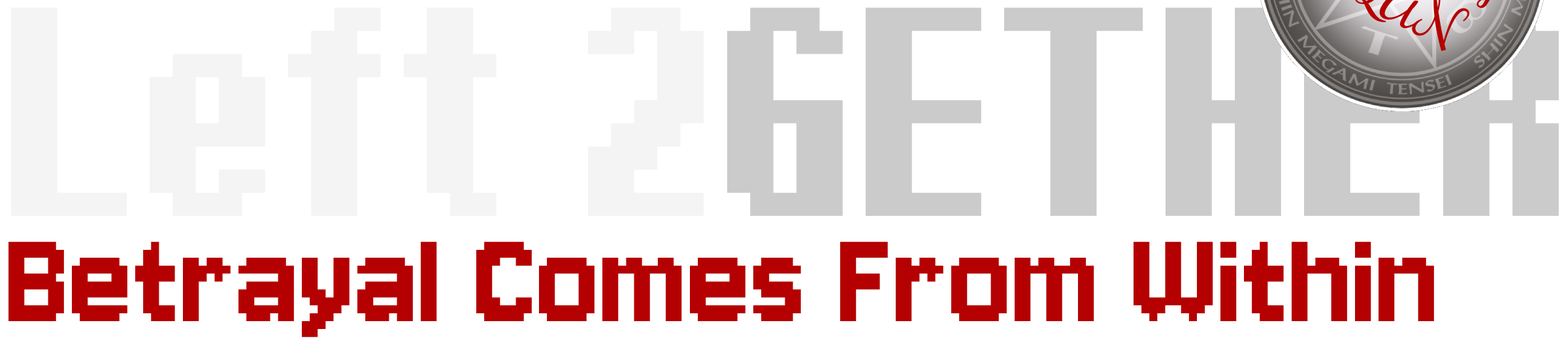
<style>
.page{position:relative;width:1568px;height:346px;background:#ffffff}
.page>*{position:absolute;margin:0}
.t1{font:369.6px "Ithaca";color:#f4f4f4}
.t2{font:369.6px "Ithaca";color:#cbcbcb}
.t3{font:147.8px "Jersey10-Regular";color:#b40000}
</style>
<div class="page">
<p class="t1" style="left:11px;top:7px;width:1548px;height:209px">Left 2<span class="t2">GETHER</span></p>
<p class="t3" style="left:8px;top:241px;width:1426px;height:96px">Betrayal Comes From Within</p>
</div>
